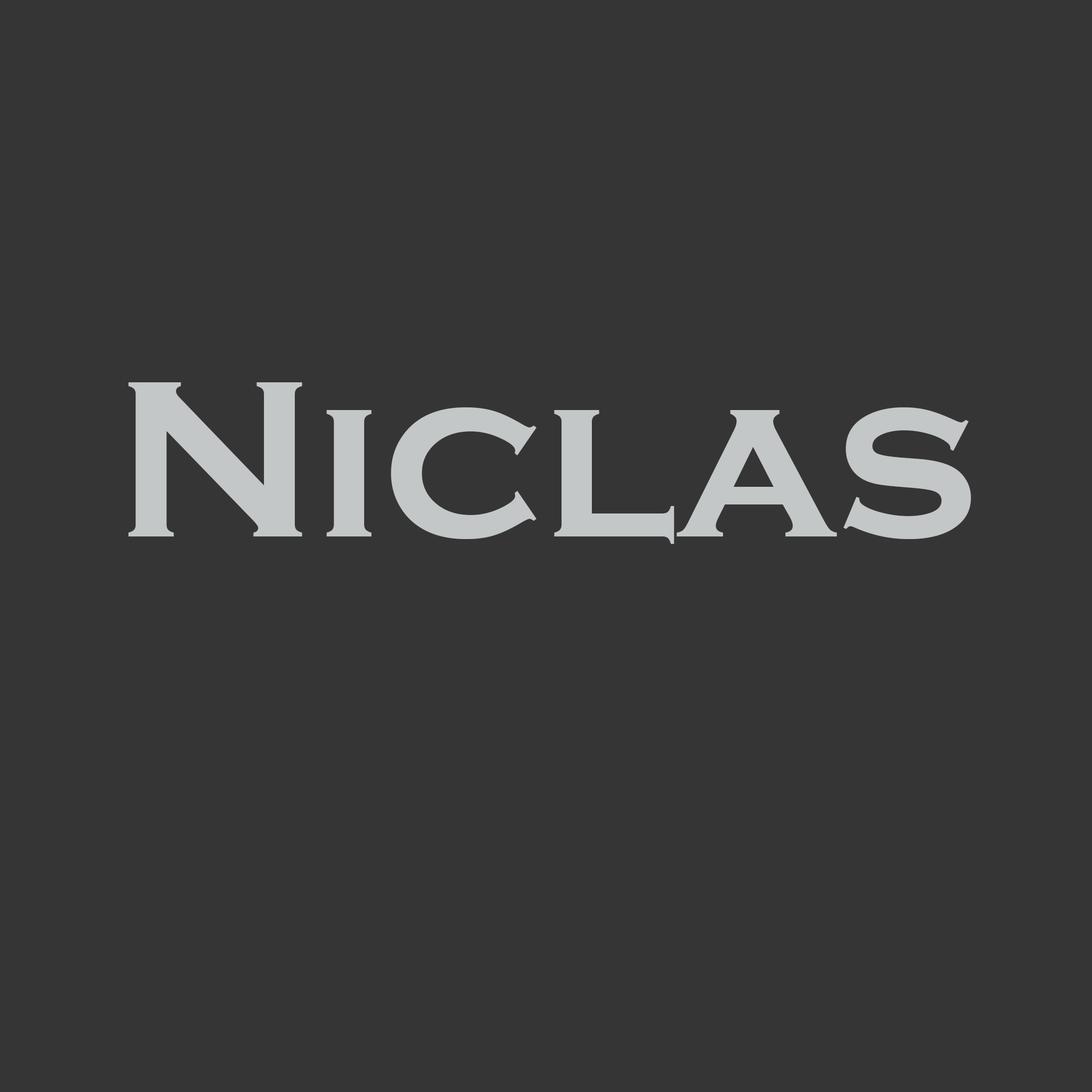
<style>
.page{position:relative;width:1092px;height:1092px;background:#353535}
.page>*{position:absolute;margin:0}
.t1{font:230.9px "CopperplateGothic-Bold";color:#c4c7c7}
</style>
<div class="page">
<p class="t1" style="left:128px;top:382px;width:843px;height:162px">Niclas</p>
</div>
